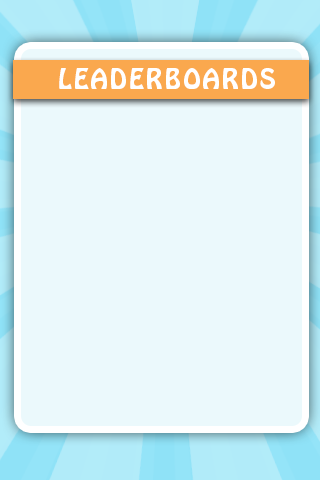
<style>
.page{position:relative;width:320px;height:480px;background:#ebf9fc}
.page>*{position:absolute;margin:0}
.t1{font:25px "HoboStd";letter-spacing:0.08em;color:#ffffff}
</style>
<div class="page">
<p class="t1" style="left:59px;top:68px;width:216px;height:21px">LEADERBOARDS</p>
</div>
